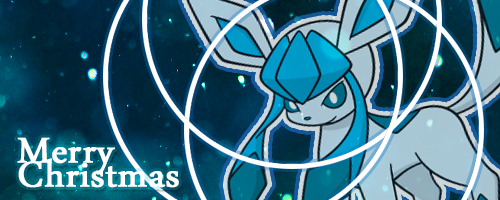
<style>
.page{position:relative;width:500px;height:200px}
.page>*{position:absolute;margin:0}
.t1{font:52px/24px "DaunPenh";color:#ffffff;font-weight:bold}
</style>
<div class="page">
<p class="t1" style="left:17px;top:137px;width:162px;height:51px">Merry<br>Christmas</p>
</div>
